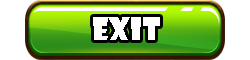
<style>
.page{position:relative;width:250px;height:60px;background:#ffffff}
.page>*{position:absolute;margin:0}
.t1{font:30px "ShowcardGothic-Reg";color:#ffffff}
</style>
<div class="page">
<p class="t1" style="left:93px;top:17px;width:67px;height:23px">Exit</p>
</div>
